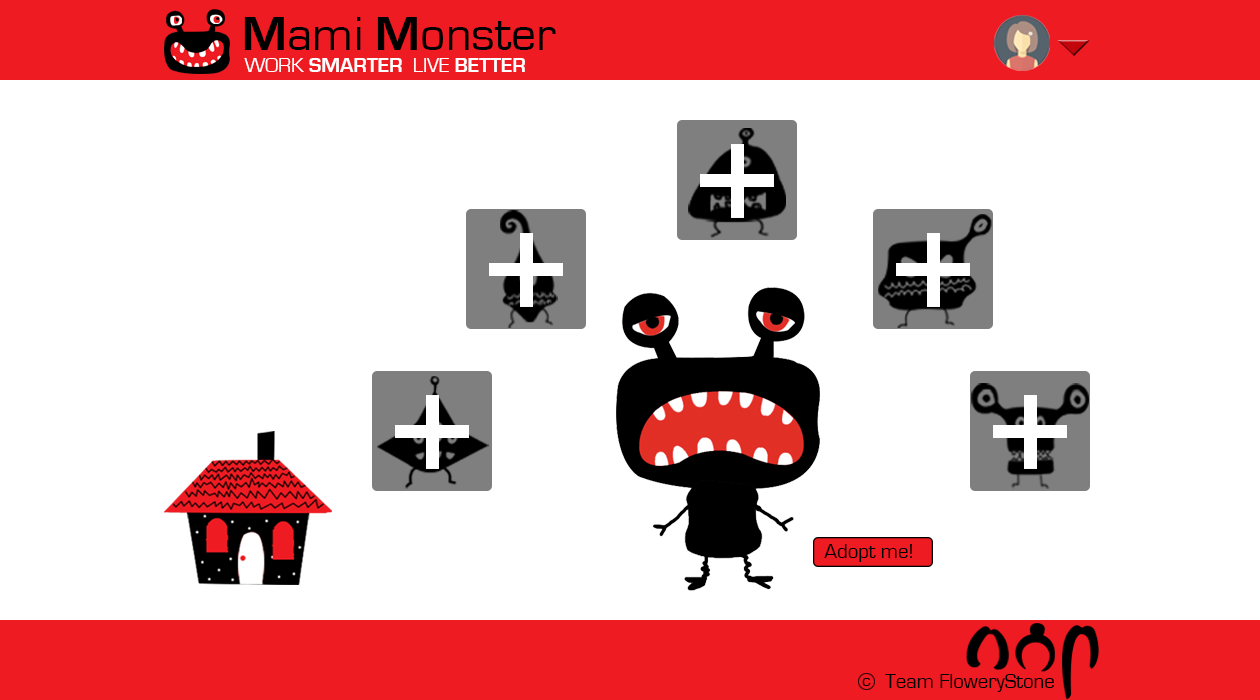
<style>
.page{position:relative;width:1260px;height:700px;background:#ffffff}
.page>*{position:absolute;margin:0}
.t1{font:50px "EurostileRegular";color:#000000}
.t2{font:50px "EurostileBold";color:#000000}
.t3{font:20.8px "EurostileBold";color:#ffffff}
.t4{font:20.8px "EurostileRegular";color:#ffffff}
.t5{font:20.8px "EurostileRegular";color:#000000}
.t6{font:17.7px "EurostileRegular";color:#000000}
</style>
<div class="page">
<p class="t1" style="left:244px;top:17px;width:312px;height:33px"><span class="t2">M</span>ami <span class="t2">M</span>onster</p>
<p class="t3" style="left:244px;top:58px;width:281px;height:14px"><span class="t4">WORK </span>SMARTER  <span class="t4">LIVE </span>BETTER</p>
<p class="t5" style="left:824px;top:544px;width:88px;height:18px">Adopt me!</p>
<p class="t6" style="left:862px;top:678px;width:9px;height:8px">c</p>
<p class="t5" style="left:885px;top:674px;width:169px;height:18px">Team FloweryStone</p>
</div>
